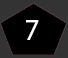
<style>
.page{position:relative;width:68px;height:58px;background:#000000}
.page>*{position:absolute;margin:0}
.t1{font:30px "MyriadPro-Regular";color:#ffffff}
</style>
<div class="page">
<p class="t1" style="left:26px;top:20px;width:13px;height:20px">7</p>
</div>
